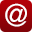
<style>
.page{position:relative;width:32px;height:32px}
.page>*{position:absolute;margin:0}
.t1{font:30.5px "HelveticaNeue";color:#ffffff}
</style>
<div class="page">
<p class="t1" style="left:5px;top:3px;width:22px;height:24px">@</p>
</div>
